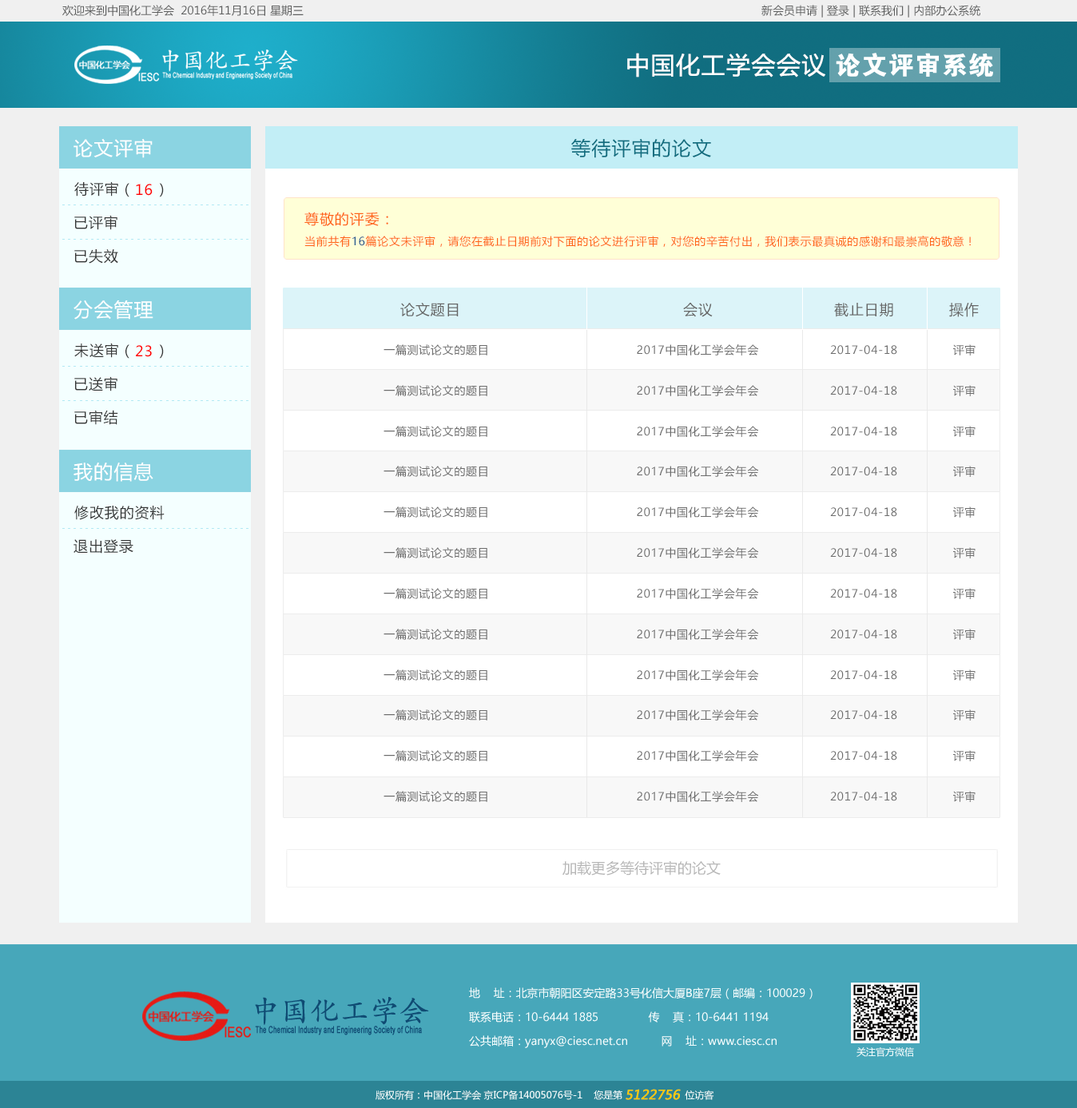
<style>
.page{position:relative;width:1077px;height:1108px;background:#ffffff}
.page>*{position:absolute;margin:0}
.t1{font:11.2px "MicrosoftYaHei";color:#5d5e5e}
.t2{font:24px "MicrosoftYaHei";letter-spacing:0.05em;color:#ffffff}
.t3{font:25.4px "FZDHTJW--GB1-0";letter-spacing:0.05em;color:#ffffff}
.t4{font:19.2px "MicrosoftYaHei";letter-spacing:0.05em;color:#ffffff}
.t5{font:19.2px "MicrosoftYaHei";letter-spacing:0.05em;color:#116e80}
.t6{font:14.4px "MicrosoftYaHei";letter-spacing:0.05em;color:#363636}
.t7{font:14.4px "MicrosoftYaHei";letter-spacing:0.05em;color:#ff0000}
.t8{font:6.4px "SimSun";letter-spacing:0.4em;color:#b2e9f4}
.t9{font:11.2px/24px "MicrosoftYaHei";letter-spacing:0.05em;color:#ff6317}
.t10{font:14.4px/24px "MicrosoftYaHei";letter-spacing:0.05em;color:#ff6317}
.t11{font:11.2px/24px "MicrosoftYaHei";letter-spacing:0.05em;color:#124a8a}
.t12{font:14.4px "MicrosoftYaHei";letter-spacing:0.05em;color:#656565}
.t13{font:11.2px "MicrosoftYaHei";letter-spacing:0.05em;color:#6c6c6c}
.t14{font:14.4px "MicrosoftYaHei";color:#b6b6b6}
.t15{font:11.2px/24px "MicrosoftYaHei";color:#f4ffff}
.t16{font:9.6px "MicrosoftYaHei";color:#f4ffff}
.t17{font:12.8px "MicrosoftYaHei";color:#ffcc00;font-weight:bold;font-style:italic}
</style>
<div class="page">
<p class="t1" style="left:62px;top:5px;width:241px;height:11px">欢迎来到中国化工学会  2016年11月16日 星期三</p>
<p class="t1" style="left:761px;top:5px;width:219px;height:13px">新会员申请 | 登录 | 联系我们 | 内部办公系统</p>
<p class="t2" style="left:627px;top:53px;width:198px;height:24px">中国化工学会会议</p>
<p class="t3" style="left:835px;top:53px;width:158px;height:24px">论文评审系统</p>
<p class="t4" style="left:73px;top:138px;width:80px;height:20px">论文评审</p>
<p class="t5" style="left:571px;top:138px;width:140px;height:20px">等待评审的论文</p>
<p class="t6" style="left:74px;top:181px;width:90px;height:16px">待评审（    ）</p>
<p class="t7" style="left:136px;top:184px;width:17px;height:12px">16</p>
<p class="t8" style="left:62px;top:204px;width:186px;height:1px">---------------------------------</p>
<p class="t6" style="left:74px;top:215px;width:43px;height:15px">已评审</p>
<p class="t9" style="left:304px;top:212px;width:666px;height:35px"><span class="t10">尊敬的评委：<br></span>当前共有<span class="t11">16</span>篇论文未评审，请您在截止日期前对下面的论文进行评审，对您的辛苦付出，我们表示最真诚的感谢和最崇高的敬意！</p>
<p class="t8" style="left:62px;top:239px;width:186px;height:1px">---------------------------------</p>
<p class="t6" style="left:74px;top:249px;width:44px;height:15px">已失效</p>
<p class="t4" style="left:73px;top:300px;width:80px;height:19px">分会管理</p>
<p class="t12" style="left:400px;top:303px;width:58px;height:14px">论文题目</p>
<p class="t12" style="left:683px;top:303px;width:29px;height:14px">会议</p>
<p class="t12" style="left:834px;top:303px;width:59px;height:14px">截止日期</p>
<p class="t12" style="left:949px;top:303px;width:29px;height:14px">操作</p>
<p class="t6" style="left:74px;top:343px;width:90px;height:16px">未送审（    ）</p>
<p class="t7" style="left:136px;top:345px;width:16px;height:12px">23</p>
<p class="t13" style="left:383px;top:344px;width:104px;height:11px">一篇测试论文的题目</p>
<p class="t13" style="left:636px;top:344px;width:123px;height:11px">2017中国化工学会年会</p>
<p class="t13" style="left:830px;top:345px;width:67px;height:10px">2017-04-18</p>
<p class="t13" style="left:953px;top:344px;width:22px;height:11px">评审</p>
<p class="t8" style="left:62px;top:366px;width:186px;height:1px">---------------------------------</p>
<p class="t6" style="left:74px;top:376px;width:43px;height:15px">已送审</p>
<p class="t13" style="left:383px;top:385px;width:104px;height:11px">一篇测试论文的题目</p>
<p class="t13" style="left:636px;top:385px;width:123px;height:11px">2017中国化工学会年会</p>
<p class="t13" style="left:830px;top:386px;width:67px;height:9px">2017-04-18</p>
<p class="t13" style="left:953px;top:385px;width:22px;height:11px">评审</p>
<p class="t8" style="left:62px;top:400px;width:186px;height:1px">---------------------------------</p>
<p class="t6" style="left:74px;top:410px;width:44px;height:15px">已审结</p>
<p class="t13" style="left:383px;top:426px;width:104px;height:11px">一篇测试论文的题目</p>
<p class="t13" style="left:636px;top:426px;width:123px;height:11px">2017中国化工学会年会</p>
<p class="t13" style="left:953px;top:426px;width:22px;height:11px">评审</p>
<p class="t13" style="left:830px;top:426px;width:67px;height:10px">2017-04-18</p>
<p class="t4" style="left:73px;top:462px;width:80px;height:20px">我的信息</p>
<p class="t13" style="left:383px;top:466px;width:104px;height:11px">一篇测试论文的题目</p>
<p class="t13" style="left:636px;top:466px;width:123px;height:11px">2017中国化工学会年会</p>
<p class="t13" style="left:830px;top:466px;width:67px;height:10px">2017-04-18</p>
<p class="t13" style="left:953px;top:466px;width:22px;height:11px">评审</p>
<p class="t6" style="left:74px;top:506px;width:91px;height:14px">修改我的资料</p>
<p class="t13" style="left:383px;top:506px;width:104px;height:11px">一篇测试论文的题目</p>
<p class="t13" style="left:636px;top:506px;width:123px;height:11px">2017中国化工学会年会</p>
<p class="t13" style="left:830px;top:507px;width:67px;height:10px">2017-04-18</p>
<p class="t13" style="left:953px;top:506px;width:22px;height:11px">评审</p>
<p class="t8" style="left:62px;top:528px;width:186px;height:1px">---------------------------------</p>
<p class="t6" style="left:73px;top:539px;width:60px;height:14px">退出登录</p>
<p class="t13" style="left:383px;top:547px;width:104px;height:11px">一篇测试论文的题目</p>
<p class="t13" style="left:636px;top:547px;width:123px;height:11px">2017中国化工学会年会</p>
<p class="t13" style="left:830px;top:548px;width:67px;height:9px">2017-04-18</p>
<p class="t13" style="left:953px;top:547px;width:22px;height:11px">评审</p>
<p class="t13" style="left:383px;top:588px;width:104px;height:11px">一篇测试论文的题目</p>
<p class="t13" style="left:636px;top:588px;width:123px;height:11px">2017中国化工学会年会</p>
<p class="t13" style="left:830px;top:589px;width:67px;height:9px">2017-04-18</p>
<p class="t13" style="left:953px;top:588px;width:22px;height:11px">评审</p>
<p class="t13" style="left:383px;top:629px;width:104px;height:11px">一篇测试论文的题目</p>
<p class="t13" style="left:636px;top:629px;width:123px;height:11px">2017中国化工学会年会</p>
<p class="t13" style="left:830px;top:629px;width:67px;height:10px">2017-04-18</p>
<p class="t13" style="left:953px;top:629px;width:22px;height:11px">评审</p>
<p class="t13" style="left:383px;top:669px;width:104px;height:11px">一篇测试论文的题目</p>
<p class="t13" style="left:636px;top:669px;width:123px;height:11px">2017中国化工学会年会</p>
<p class="t13" style="left:830px;top:670px;width:67px;height:10px">2017-04-18</p>
<p class="t13" style="left:953px;top:669px;width:22px;height:11px">评审</p>
<p class="t13" style="left:383px;top:709px;width:104px;height:11px">一篇测试论文的题目</p>
<p class="t13" style="left:636px;top:709px;width:123px;height:11px">2017中国化工学会年会</p>
<p class="t13" style="left:830px;top:710px;width:67px;height:10px">2017-04-18</p>
<p class="t13" style="left:953px;top:709px;width:22px;height:11px">评审</p>
<p class="t13" style="left:383px;top:750px;width:104px;height:11px">一篇测试论文的题目</p>
<p class="t13" style="left:636px;top:750px;width:123px;height:11px">2017中国化工学会年会</p>
<p class="t13" style="left:953px;top:750px;width:22px;height:11px">评审</p>
<p class="t13" style="left:830px;top:751px;width:67px;height:9px">2017-04-18</p>
<p class="t13" style="left:383px;top:791px;width:104px;height:11px">一篇测试论文的题目</p>
<p class="t13" style="left:636px;top:791px;width:123px;height:11px">2017中国化工学会年会</p>
<p class="t13" style="left:830px;top:791px;width:67px;height:10px">2017-04-18</p>
<p class="t13" style="left:953px;top:791px;width:22px;height:11px">评审</p>
<p class="t14" style="left:562px;top:860px;width:158px;height:15px">加载更多等待评审的论文</p>
<p class="t15" style="left:469px;top:987px;width:343px;height:61px">地    址：北京市朝阳区安定路33号化信大厦B座7层（邮编：100029）<br>联系电话：10-6444 1885               传    真：10-6441 1194<br>公共邮箱：yanyx@ciesc.net.cn          网    址：www.ciesc.cn</p>
<p class="t16" style="left:856px;top:1047px;width:58px;height:10px">关注官方微信</p>
<p class="t16" style="left:375px;top:1089px;width:339px;height:11px">版权所有：中国化工学会 京ICP备14005076号-1    您是第                      位访客</p>
<p class="t17" style="left:625px;top:1089px;width:55px;height:11px">5122756</p>
</div>
